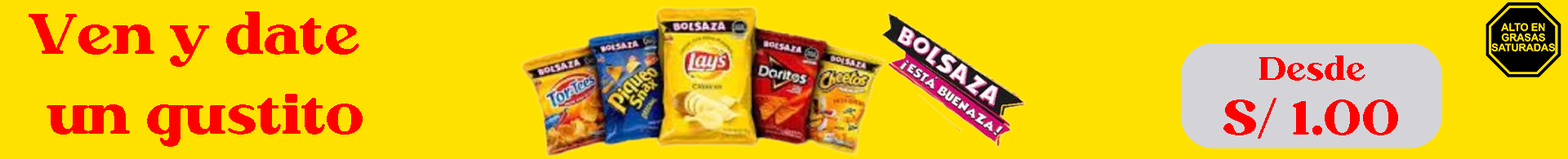
<style>
.page{position:relative;width:1568px;height:159px;background:#ffe100}
.page>*{position:absolute;margin:0}
.t1{font:57.2px "Megusto-Regular";color:#ff0000}
.t2{font:32.7px "Megusto-Regular";color:#ff0000}
.t3{font:49px "Megusto-Regular";color:#ff0000}
</style>
<div class="page">
<p class="t1" style="left:29px;top:11px;width:330px;height:56px">Ven y date</p>
<p class="t2" style="left:1259px;top:56px;width:106px;height:25px">Desde</p>
<p class="t1" style="left:47px;top:94px;width:316px;height:53px">un gustito</p>
<p class="t3" style="left:1223px;top:98px;width:175px;height:41px">S/ 1.00</p>
</div>
